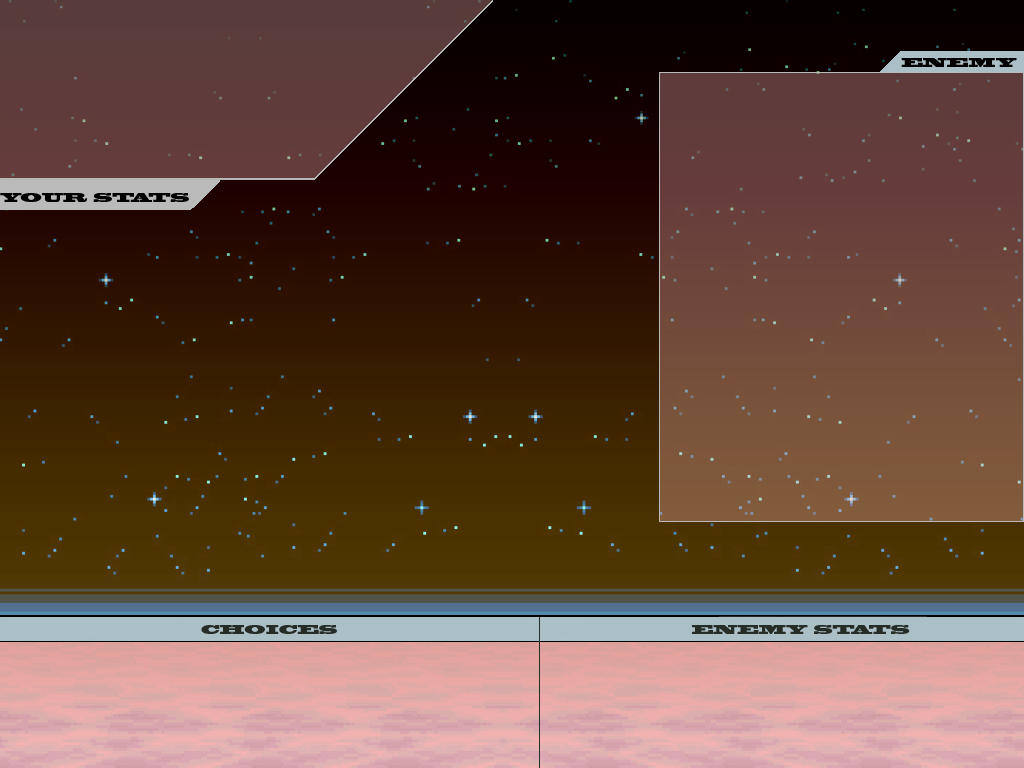
<style>
.page{position:relative;width:1024px;height:768px}
.page>*{position:absolute;margin:0}
.t1{font:12px "BlackoakStd";color:#000000}
.t2{font:12px "BlackoakStd";color:#262c26}
</style>
<div class="page">
<p class="t1" style="left:901px;top:58px;width:116px;height:9px">ENEMY</p>
<p class="t1" style="left:0px;top:193px;width:189px;height:9px">YOUR STATS</p>
<p class="t2" style="left:201px;top:625px;width:136px;height:9px">CHOICES</p>
<p class="t2" style="left:692px;top:625px;width:218px;height:9px">ENEMY STATS</p>
</div>
